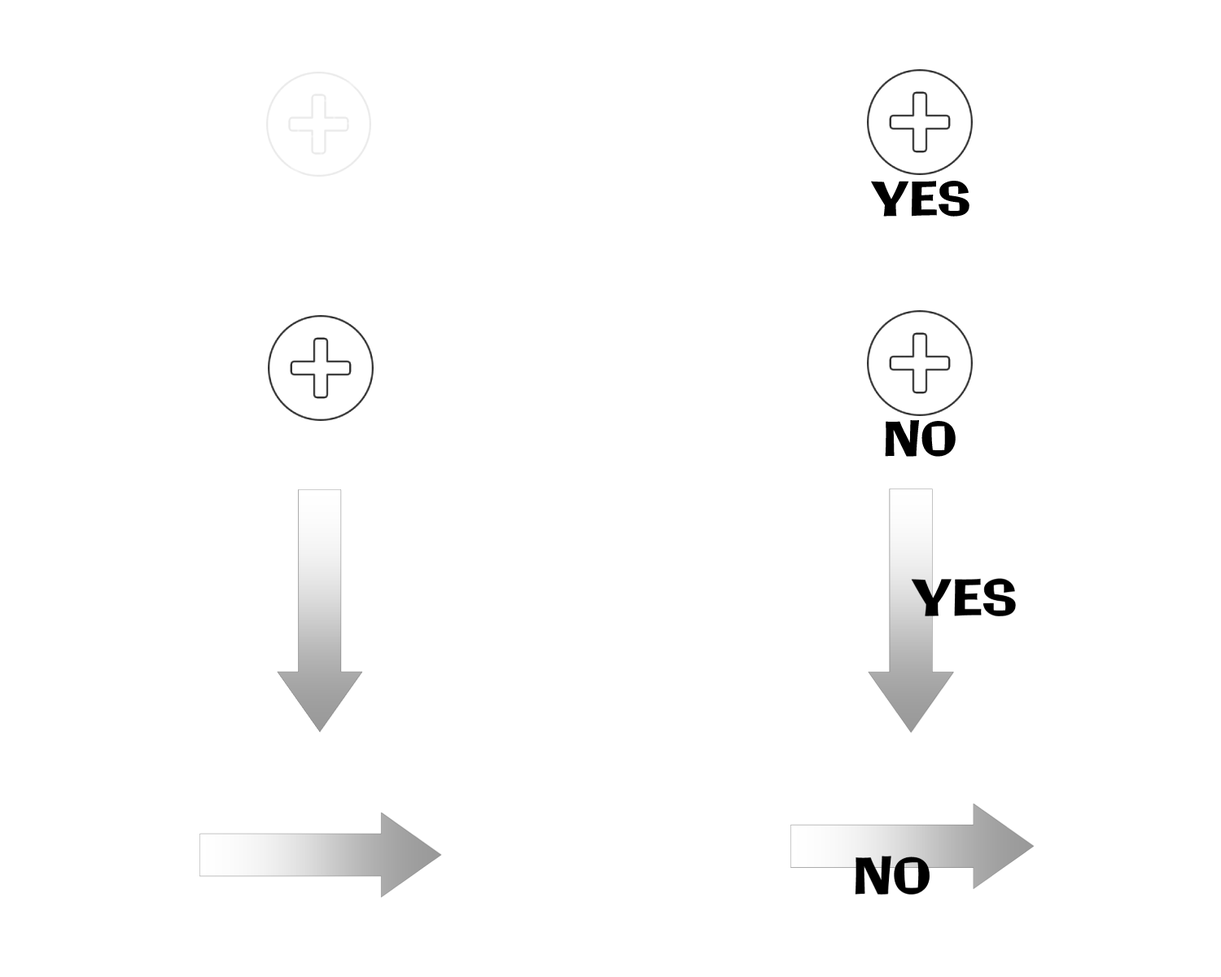
<style>
.page{position:relative;width:1221px;height:977px;background:#ffffff}
.page>*{position:absolute;margin:0}
.t1{font:46.7px "Galindo-Regular";color:#000000}
</style>
<div class="page">
<p class="t1" style="left:871px;top:181px;width:98px;height:36px">YES</p>
<p class="t1" style="left:885px;top:420px;width:71px;height:37px">NO</p>
</div>
